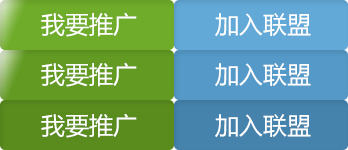
<style>
.page{position:relative;width:348px;height:150px}
.page>*{position:absolute;margin:0}
.t1{font:24px "MicrosoftYaHei";color:#ffffff}
</style>
<div class="page">
<p class="t1" style="left:41px;top:12px;width:96px;height:25px">我要推广</p>
<p class="t1" style="left:215px;top:13px;width:96px;height:24px">加入联盟</p>
<p class="t1" style="left:41px;top:62px;width:96px;height:25px">我要推广</p>
<p class="t1" style="left:215px;top:63px;width:96px;height:24px">加入联盟</p>
<p class="t1" style="left:41px;top:113px;width:96px;height:25px">我要推广</p>
<p class="t1" style="left:215px;top:114px;width:96px;height:24px">加入联盟</p>
</div>
